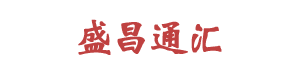
<style>
.page{position:relative;width:300px;height:80px;background:#ffffff}
.page>*{position:absolute;margin:0}
.t1{font:40px "FZWBJW--GB1-0";color:#bf4140;text-transform:uppercase;font-weight:bold}
</style>
<div class="page">
<p class="t1" style="left:78px;top:19px;width:144px;height:36px">盛昌通汇</p>
</div>
